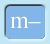
<style>
.page{position:relative;width:50px;height:44px;background:#82b5e8}
.page>*{position:absolute;margin:0}
.t1{font:24px "Times-Roman";color:#ffffff}
</style>
<div class="page">
<p class="t1" style="left:10px;top:16px;width:31px;height:12px">m–</p>
</div>
